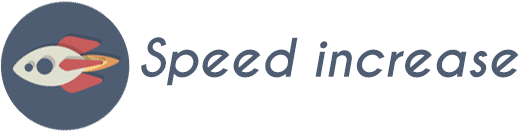
<style>
.page{position:relative;width:528px;height:132px;background:#ffffff}
.page>*{position:absolute;margin:0}
.t1{font:50px "CaviarDreams-BoldItalic";color:#4f5d73}
</style>
<div class="page">
<p class="t1" style="left:141px;top:37px;width:378px;height:49px">Speed increase</p>
</div>
